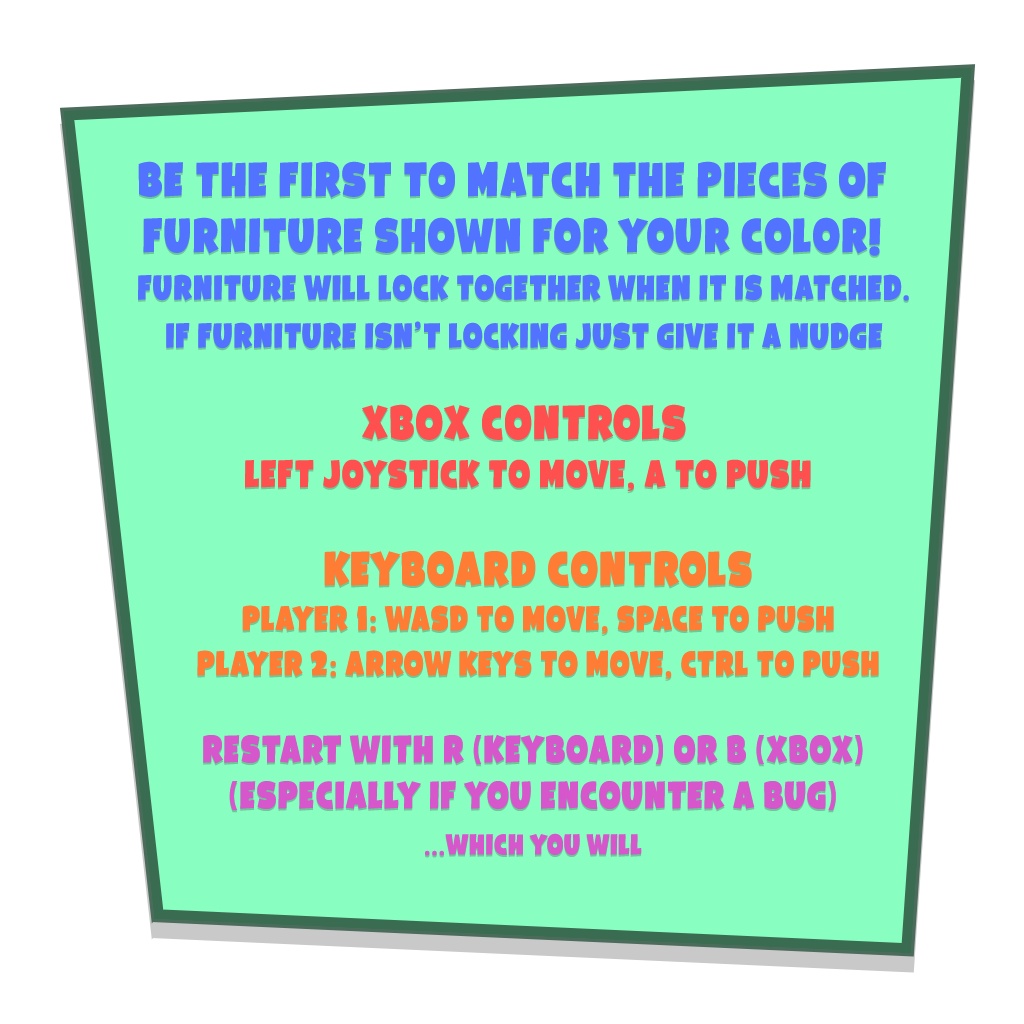
<style>
.page{position:relative;width:1024px;height:1024px;background:#88ffc0}
.page>*{position:absolute;margin:0}
.t1{font:50px/56px "Galpon-Black";color:#5273ff}
.t2{font:36px "Galpon-Black";color:#5273ff}
.t3{font:40px/48px "Galpon-Black";color:#ff5050}
.t4{font:50px/48px "Galpon-Black";color:#ff5050}
.t5{font:36px/45px "Galpon-Black";color:#ff7c34}
.t6{font:50px/45px "Galpon-Black";color:#ff7c34}
.t7{font:40px/46px "Galpon-Black";color:#d656cb}
.t8{font:30px/46px "Galpon-Black";color:#d656cb}
</style>
<div class="page">
<p class="t1" style="left:138px;top:161px;width:748px;height:95px;text-align:center">Be the first to match the pieces of furniture shown for your color!</p>
<p class="t2" style="left:138px;top:274px;width:771px;height:27px">Furniture will lock together when it is matched.</p>
<p class="t2" style="left:166px;top:321px;width:717px;height:28px">If furniture isn’t locking just give it a nudge</p>
<p class="t3" style="left:245px;top:404px;width:566px;height:87px;text-align:center"><span class="t4">XBox controls<br></span> left joystick to move, a to push</p>
<p class="t5" style="left:197px;top:550px;width:682px;height:129px;text-align:center"><span class="t6">Keyboard Controls<br></span>Player 1: wasd to move, space to push<br>Player 2: arrow keys to move, ctrl to push</p>
<p class="t7" style="left:203px;top:734px;width:660px;height:122px;text-align:center">Restart with r (keyboard) or b (xbox)<br>(especially if you encounter a bug)<br><span class="t8">...which you will</span></p>
</div>
